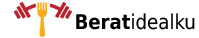
<style>
.page{position:relative;width:199px;height:38px;background:#ffffff}
.page>*{position:absolute;margin:0}
.t1{font:20.2px "DejaVuSansCondensed";color:#000000}
.t2{font:20.2px "DejaVuSansCondensed-Bold";color:#000000}
</style>
<div class="page">
<p class="t1" style="left:76px;top:13px;width:119px;height:17px"><span class="t2">Berat</span>idealku</p>
</div>
